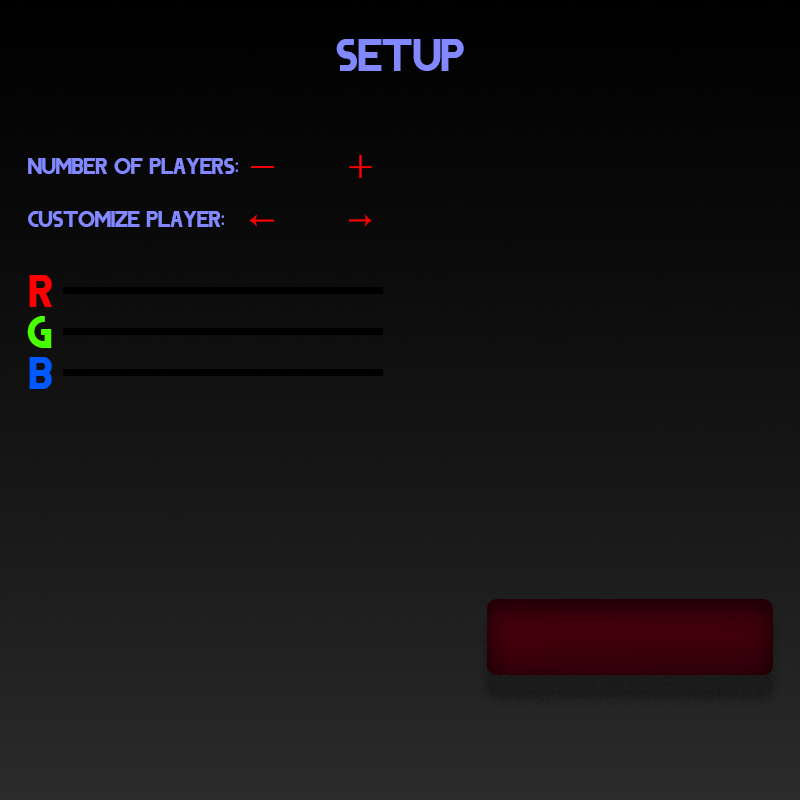
<style>
.page{position:relative;width:800px;height:800px}
.page>*{position:absolute;margin:0}
.t1{font:40.5px "DODGE";color:#8288ff}
.t2{font:19.9px "DODGE";color:#8288ff}
.t3{font:19.9px "MyriadPro-Regular";color:#8288ff}
.t4{font:40.5px "DODGE";color:#ff0000}
.t5{font:40.5px "DODGE";color:#48ff00}
.t6{font:40.5px "DODGE";color:#0059ff}
</style>
<div class="page">
<p class="t1" style="left:336px;top:39px;width:128px;height:32px">setup</p>
<p class="t2" style="left:28px;top:158px;width:210px;height:16px">Number of players<span class="t3">:</span></p>
<p class="t2" style="left:28px;top:211px;width:196px;height:16px">Customize Player<span class="t3">:</span></p>
<p class="t4" style="left:29px;top:275px;width:23px;height:32px">R</p>
<p class="t5" style="left:27px;top:316px;width:25px;height:32px">G</p>
<p class="t6" style="left:29px;top:357px;width:23px;height:32px">B</p>
</div>
